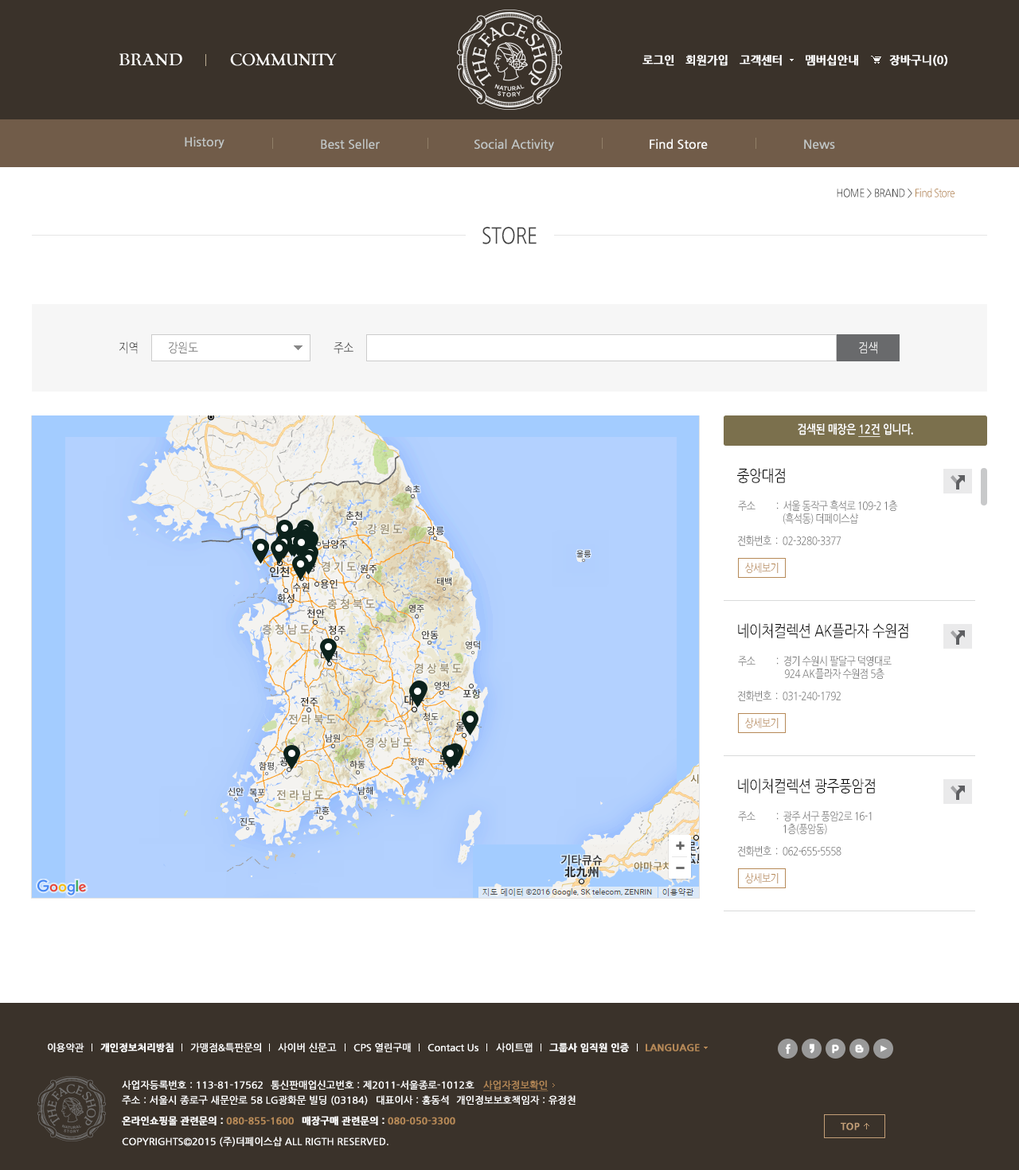
<style>
.page{position:relative;width:1019px;height:1170px;background:#ffffff}
.page>*{position:absolute;margin:0}
.t1{font:11.1px "NanumGothicBold";color:#ffffff;font-weight:bold}
.t2{font:11.9px "NanumGothic";color:#c1c6c5;font-weight:bold}
.t3{font:11.9px "NanumGothic";color:#ffffff;font-weight:bold}
.t4{font:11.1px "NanumGothic";letter-spacing:-0.03em;color:#333333;scale:0.85 1}
.t5{font:11.1px "NanumGothic";letter-spacing:-0.03em;color:#b68957;scale:0.85 1}
.t6{font:12.7px "NanumGothic";letter-spacing:-0.03em;color:#444444;scale:0.85 1}
.t7{font:12.7px "NanumGothic";letter-spacing:-0.03em;color:#767676;scale:0.85 1}
.t8{font:11.9px "NanumGothicBold";letter-spacing:-0.03em;color:#ffffff;scale:0.85 1}
.t9{font:11.9px "NanumGothicBold";letter-spacing:-0.03em;color:#ffffff;text-decoration:underline;scale:0.85 1}
.t10{font:15.9px "NanumGothic";letter-spacing:-0.03em;color:#0c0c0c;scale:0.85 1}
.t11{font:11.1px/12.7px "NanumGothic";letter-spacing:-0.03em;color:#767676;scale:0.85 1}
.t12{font:11.1px "NanumGothic";letter-spacing:-0.03em;color:#767676;scale:0.85 1}
.t13{font:9.6px "NanumGothic";color:#ffffff;font-weight:bold}
.t14{font:9.6px "NanumGothicBold";color:#ffffff;font-weight:bold}
.t15{font:9.6px "NanumGothicBold";color:#b68957;font-weight:bold}
.t16{font:9.6px "NanumGothic";color:#b68957;font-weight:bold;text-decoration:underline}
</style>
<div class="page">
<p class="t1" style="left:642px;top:55px;width:32px;height:11px">로그인</p>
<p class="t1" style="left:685px;top:55px;width:43px;height:11px">회원가입</p>
<p class="t1" style="left:740px;top:55px;width:42px;height:11px">고객센터</p>
<p class="t1" style="left:806px;top:55px;width:52px;height:11px">멤버십안내</p>
<p class="t1" style="left:889px;top:55px;width:58px;height:11px">장바구니(0)</p>
<p class="t2" style="left:185px;top:136px;width:39px;height:13px">History</p>
<p class="t2" style="left:321px;top:139px;width:59px;height:10px">Best Seller</p>
<p class="t2" style="left:474px;top:139px;width:80px;height:12px">Social Activity</p>
<p class="t3" style="left:650px;top:139px;width:58px;height:10px">Find Store</p>
<p class="t2" style="left:804px;top:139px;width:31px;height:10px">News</p>
<p class="t4" style="left:837px;top:188px;width:117px;height:10px">HOME &gt; BRAND &gt;<span class="t5"> Find Store</span></p>
<p class="t6" style="left:119px;top:342px;width:19px;height:12px">지역</p>
<p class="t7" style="left:169px;top:342px;width:29px;height:12px">강원도</p>
<p class="t6" style="left:334px;top:342px;width:19px;height:12px">주소</p>
<p class="t8" style="left:798px;top:424px;width:115px;height:13px">검색된 매장은 <span class="t9">12건</span> 입니다.</p>
<p class="t10" style="left:737px;top:468px;width:48px;height:15px">중앙대점</p>
<p class="t11" style="left:738px;top:501px;width:160px;height:24px">주소          :  서울 동작구 흑석로 109-2 1층<br>                     (흑석동) 더페이스샵</p>
<p class="t12" style="left:737px;top:536px;width:104px;height:10px">전화번호  :  02-3280-3377</p>
<p class="t5" style="left:745px;top:563px;width:34px;height:10px">상세보기</p>
<p class="t10" style="left:738px;top:623px;width:170px;height:15px">네이처컬렉션 AK플라자 수원점</p>
<p class="t11" style="left:738px;top:656px;width:154px;height:23px">주소          :  경기 수원시 팔달구 덕영대로 <br>                      924 AK플라자 수원점 5층</p>
<p class="t12" style="left:737px;top:691px;width:104px;height:10px">전화번호  :  031-240-1792</p>
<p class="t5" style="left:745px;top:718px;width:34px;height:10px">상세보기</p>
<p class="t10" style="left:738px;top:779px;width:137px;height:15px">네이처컬렉션 광주풍암점</p>
<p class="t11" style="left:738px;top:811px;width:134px;height:24px">주소          :  광주 서구 풍암2로 16-1<br>                     1층(풍암동)</p>
<p class="t12" style="left:737px;top:846px;width:104px;height:11px">전화번호  :  062-655-5558</p>
<p class="t5" style="left:745px;top:873px;width:34px;height:11px">상세보기</p>
<p class="t13" style="left:48px;top:1043px;width:36px;height:9px">이용약관</p>
<p class="t14" style="left:100px;top:1043px;width:74px;height:9px">개인정보처리방침</p>
<p class="t13" style="left:190px;top:1043px;width:71px;height:9px">가맹점&amp;특판문의</p>
<p class="t13" style="left:278px;top:1043px;width:59px;height:9px">사이버 신문고</p>
<p class="t13" style="left:353px;top:1043px;width:58px;height:9px">CPS 열린구매</p>
<p class="t13" style="left:427px;top:1044px;width:51px;height:8px">Contact Us</p>
<p class="t13" style="left:496px;top:1043px;width:37px;height:9px">사이트맵</p>
<p class="t14" style="left:549px;top:1043px;width:80px;height:9px">그룹사 임직원 인증</p>
<p class="t15" style="left:646px;top:1044px;width:54px;height:8px">LANGUAGE</p>
<p class="t13" style="left:122px;top:1080px;width:141px;height:10px">사업자등록번호 : 113-81-17562</p>
<p class="t13" style="left:271px;top:1080px;width:203px;height:10px">통신판매업신고번호 : 제2011-서울종로-1012호</p>
<p class="t16" style="left:483px;top:1080px;width:65px;height:11px">사업자정보확인</p>
<p class="t13" style="left:122px;top:1095px;width:246px;height:11px">주소 : 서울시 종로구 새문안로 58 LG광화문 빌딩 (03184)</p>
<p class="t13" style="left:377px;top:1095px;width:72px;height:10px">대표이사 : 홍동석</p>
<p class="t13" style="left:456px;top:1095px;width:120px;height:10px">개인정보보호책임자 : 유정천</p>
<p class="t14" style="left:122px;top:1116px;width:172px;height:10px">온라인쇼핑몰 관련문의 : <span class="t15">080-855-1600</span></p>
<p class="t15" style="left:302px;top:1116px;width:153px;height:10px"><span class="t14">매장구매 관련문의 : </span>080-050-3300</p>
<p class="t13" style="left:122px;top:1137px;width:266px;height:10px">COPYRIGHTS©2015 (주)더페이스샵 ALL RIGTH RESERVED.</p>
</div>
